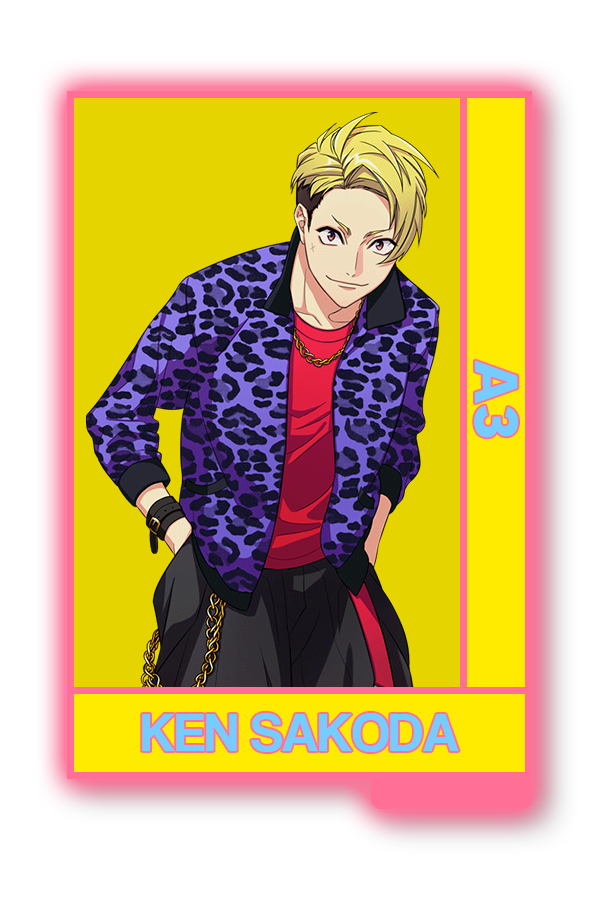
<style>
.page{position:relative;width:600px;height:900px;background:#ffffff}
.page>*{position:absolute;margin:0}
.t1{font:60.5px "MADETOMMY-Bold";color:#74ccff}
.t2{font:55.6px "CoolveticaRg-Regular";color:#74ccff}
</style>
<div class="page">
<p class="t1" style="left:474px;top:360px;width:44px;height:78px;rotate:90deg">A3</p>
<p class="t2" style="left:142px;top:713px;width:317px;height:39px">KEN SAKODA</p>
</div>
